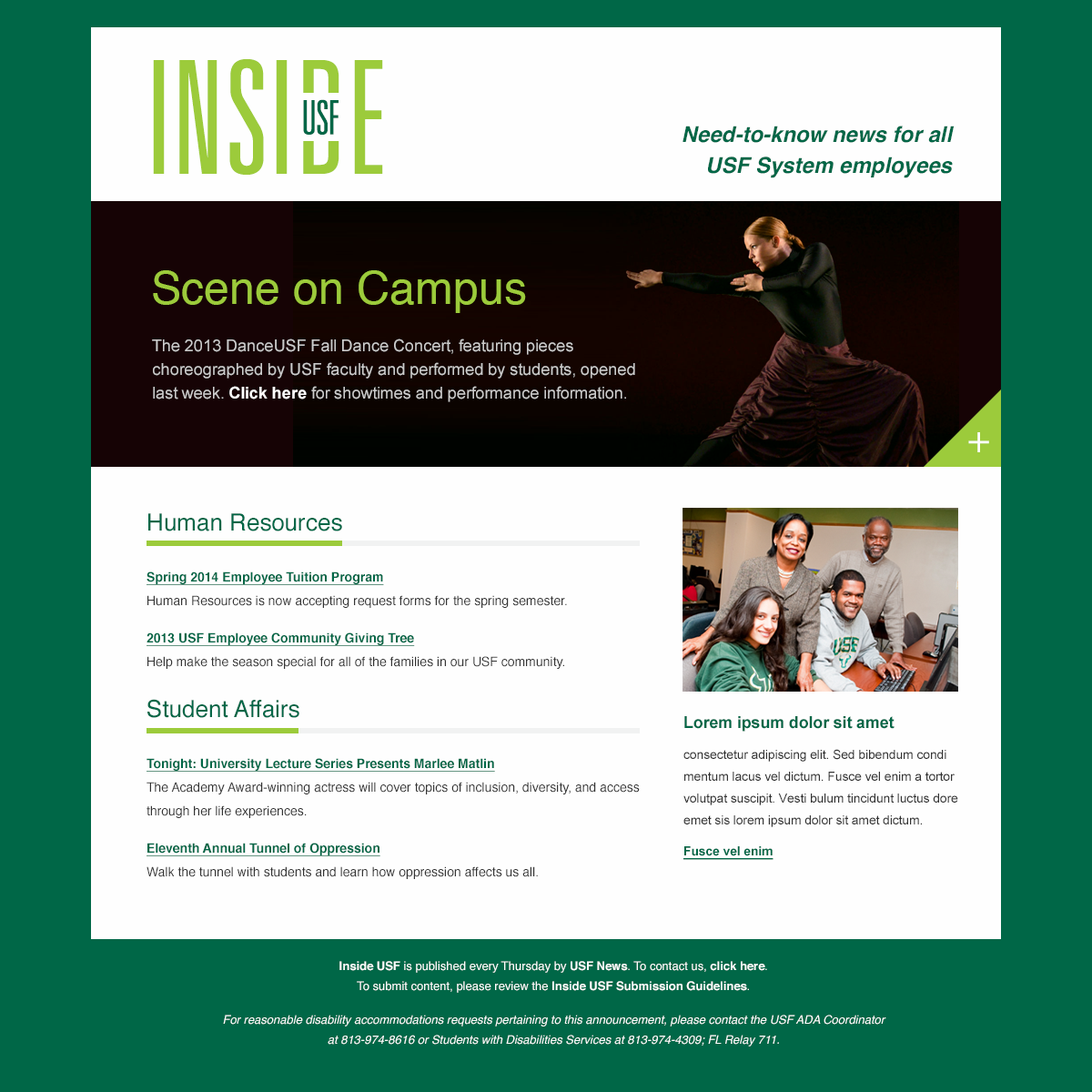
<style>
.page{position:relative;width:1092px;height:1092px;background:#fefefe}
.page>*{position:absolute;margin:0}
.t1{font:157.5px "Univers-LightUltraCondensed";color:#9ccb3b;text-transform:uppercase}
.t2{font:47.3px "Univers-LightUltraCondensed";letter-spacing:-0.025em;color:#006747;text-transform:uppercase}
.t3{font:21.8px/30.9px "Helvetica-BoldOblique";color:#006747}
.t4{font:45.5px "Helvetica";color:#9ccb3b}
.t5{font:16.4px/23.7px "ArialMT";color:#cccccc}
.t6{font:16.4px/23.7px "Arial-BoldMT";color:#ffffff}
.t7{font:40px "Univers-Light";color:#fefefe}
.t8{font:12.7px/23.7px "Helvetica";color:#333333}
.t9{font:23.7px/23.7px "Helvetica";color:#006747}
.t10{font:12.7px/23.7px "Helvetica-Bold";color:#006747;text-decoration:underline}
.t11{font:12.7px/21.8px "ArialMT";letter-spacing:-0.01em;color:#333333}
.t12{font:16.4px/21.8px "Arial-BoldMT";letter-spacing:-0.01em;color:#006747}
.t13{font:12.7px/21.8px "Arial-BoldMT";letter-spacing:-0.01em;color:#006747;text-decoration:underline}
.t14{font:11.8px/20px "Helvetica-Oblique";color:#fefefe}
.t15{font:11.8px/20px "Helvetica-Bold";color:#fefefe}
.t16{font:11.8px/20px "Helvetica";color:#fefefe}
</style>
<div class="page">
<p class="t1" style="left:153px;top:59px;width:230px;height:116px">Inside</p>
<p class="t2" style="left:303px;top:99px;width:36px;height:36px">USF</p>
<p class="t3" style="left:682px;top:126px;width:273px;height:52px;text-align:right">Need-to-know news for all<br>USF System employees</p>
<p class="t4" style="left:153px;top:270px;width:373px;height:43px">Scene on Campus</p>
<p class="t5" style="left:152px;top:339px;width:483px;height:63px">The 2013 DanceUSF Fall Dance Concert, featuring pieces choreographed by USF faculty and performed by students, opened last week. <span class="t6">Click here</span> for showtimes and performance information.</p>
<p class="t7" style="left:968px;top:432px;width:21px;height:20px">+</p>
<p class="t8" style="left:147px;top:513px;width:493px;height:366px"><span class="t9">Human Resources<br></span><span class="t10">Spring 2014 Employee Tuition Program<br></span>Human Resources is now accepting request forms for the spring semester.<br><span class="t10">2013 USF Employee Community Giving Tree<br></span>Help make the season special for all of the families in our USF community.<br><span class="t9">Student Affairs<br></span><span class="t10">Tonight: University Lecture Series Presents Marlee Matlin<br></span>The Academy Award-winning actress will cover topics of inclusion, diversity, and access through her life experiences.<br><span class="t10">Eleventh Annual Tunnel of Oppression<br></span>Walk the tunnel with students and learn how oppression affects us all.</p>
<p class="t11" style="left:683px;top:716px;width:275px;height:144px"><span class="t12">Lorem ipsum dolor sit amet<br></span>consectetur adipiscing elit. Sed bibendum condi mentum lacus vel dictum. Fusce vel enim a tortor volutpat suscipit. Vesti bulum tincidunt luctus dore emet sis lorem ipsum dolor sit amet dictum.<br><span class="t13">Fusce vel enim</span></p>
<p class="t14" style="left:223px;top:961px;width:663px;height:85px;text-align:center"><span class="t15">Inside USF</span><span class="t16"> is published every Thursday by </span><span class="t15">USF News</span><span class="t16">. To contact us, </span><span class="t15">click here</span><span class="t16">.<br>To submit content, please review the </span><span class="t15">Inside USF Submission Guidelines</span><span class="t16">.<br></span>For reasonable disability accommodations requests pertaining to this announcement, please contact the USF ADA Coordinator<br>at 813-974-8616 or Students with Disabilities Services at 813-974-4309; FL Relay 711.</p>
</div>
